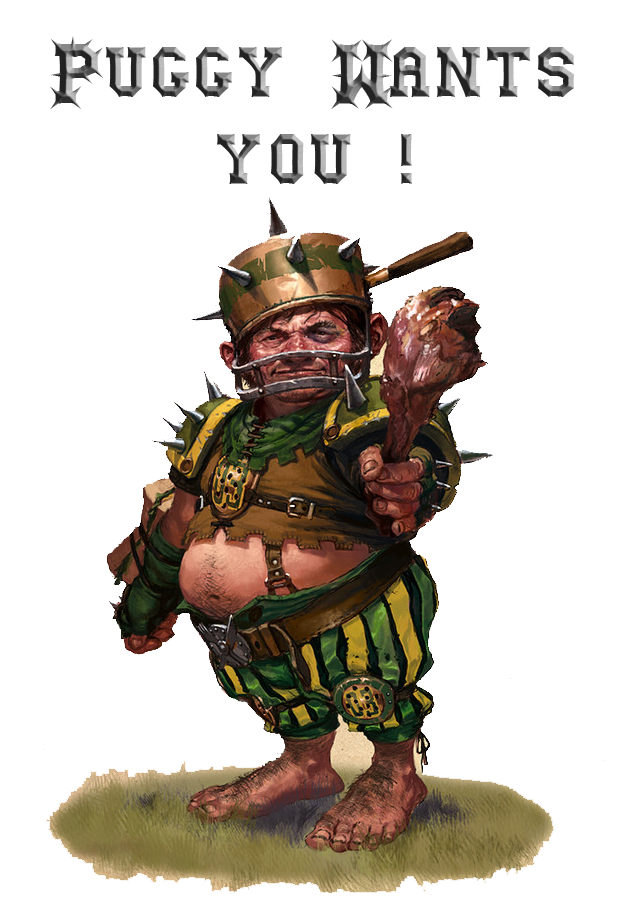
<style>
.page{position:relative;width:640px;height:905px;background:#ffffff}
.page>*{position:absolute;margin:0}
.t1{font:72px "GutcruncherNormal"}
</style>
<div class="page">
<p class="t1" style="left:50px;top:36px;width:525px;height:148px;text-align:center">Puggy Wants <br>you !</p>
</div>
